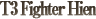
<style>
.page{position:relative;width:96px;height:19px;background:#ffffff}
.page>*{position:absolute;margin:0}
.t1{font:18px "RyuminPro-ExBold";letter-spacing:-0.12em;color:#4a3f32;font-weight:bold;scale:0.85 1}
</style>
<div class="page">
<p class="t1" style="left:0px;top:1px;width:97px;height:18px">T3 Fighter Hien</p>
</div>
